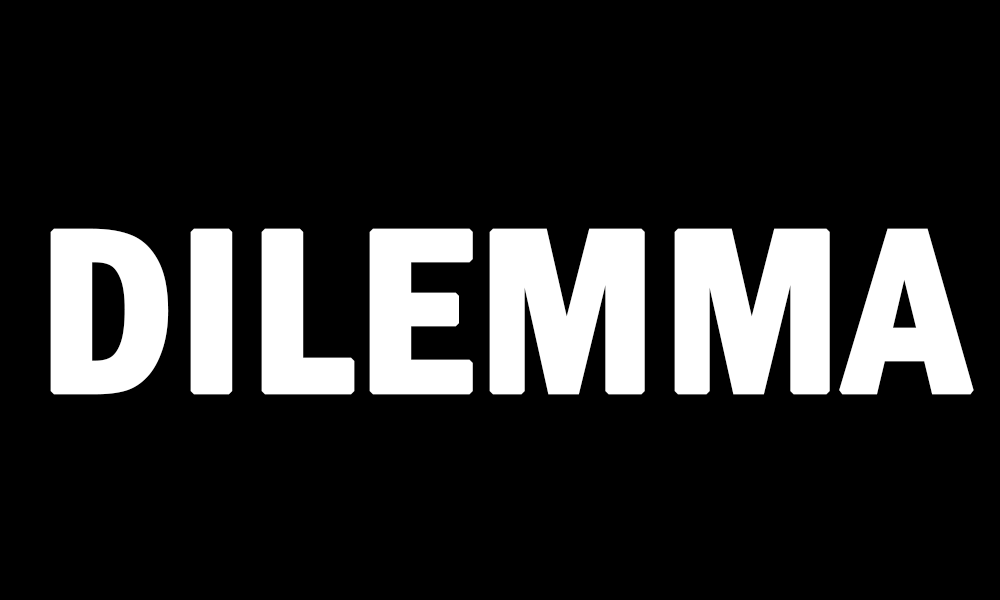
<style>
.page{position:relative;width:1000px;height:600px;background:#000000}
.page>*{position:absolute;margin:0}
.t1{font:238px "FranklinGothic-DemiCond";color:#ffffff;font-weight:bold}
</style>
<div class="page">
<p class="t1" style="left:50px;top:228px;width:924px;height:167px">DILEMMA</p>
</div>
